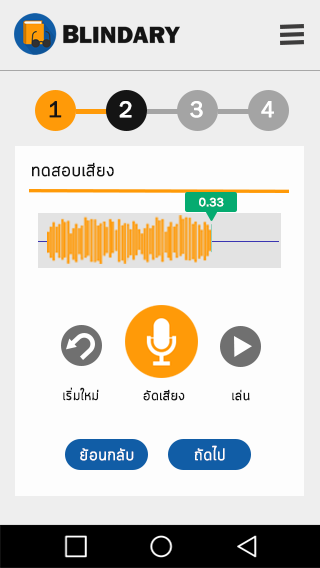
<style>
.page{position:relative;width:320px;height:568px;background:#fdfdfd}
.page>*{position:absolute;margin:0}
.t1{font:23px "FranklinGothic-Book";color:#141414;font-weight:bold}
.t2{font:23px "FranklinGothic-Book";color:#fefefe;font-weight:bold}
.t3{font:23px "FranklinGothic-Book";color:#ffffff;font-weight:bold}
.t4{font:18px "Cloud-Light";color:#141414;font-weight:bold}
.t5{font:12.2px "FranklinGothic-Book";color:#ffffff;font-weight:bold}
.t6{font:13.9px "Cloud-Light";color:#141414;font-weight:bold;scale:0.97 1}
.t7{font:13.9px "Cloud-Light";color:#141414;font-weight:bold}
.t8{font:16.2px "Cloud-Light";color:#fefdfd;font-weight:bold}
</style>
<div class="page">
<p class="t1" style="left:49px;top:101px;width:13px;height:17px">1</p>
<p class="t2" style="left:119px;top:101px;width:13px;height:17px">2</p>
<p class="t3" style="left:190px;top:101px;width:13px;height:17px">3</p>
<p class="t3" style="left:261px;top:101px;width:13px;height:17px">4</p>
<p class="t4" style="left:32px;top:162px;width:82px;height:15px">ทดสอบเสียง</p>
<p class="t5" style="left:199px;top:197px;width:25px;height:10px">0.33</p>
<p class="t6" style="left:63px;top:387px;width:36px;height:14px">เริ่มใหม่</p>
<p class="t7" style="left:143px;top:389px;width:42px;height:12px">อัดเสียง</p>
<p class="t7" style="left:232px;top:389px;width:18px;height:12px">เล่น</p>
<p class="t8" style="left:80px;top:448px;width:54px;height:13px">ย้อนกลับ</p>
<p class="t8" style="left:194px;top:445px;width:31px;height:16px">ถัดไป</p>
</div>
